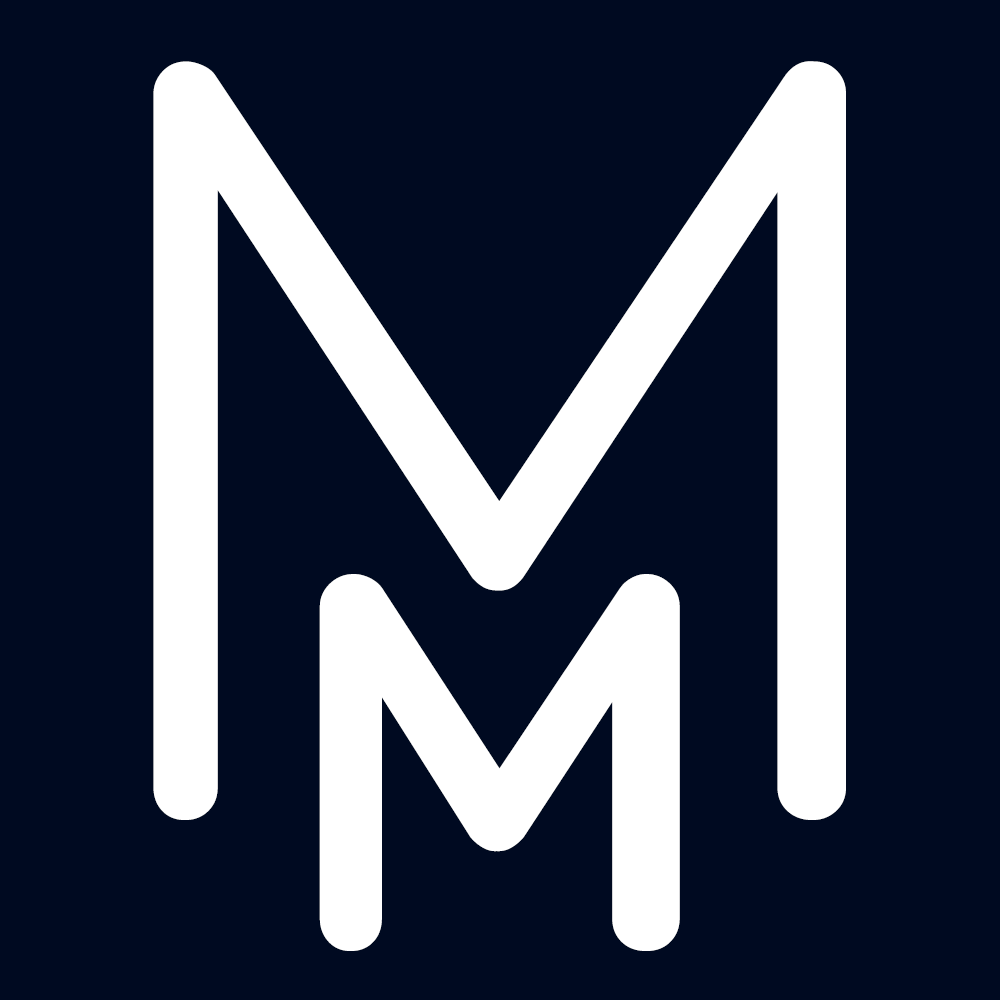
<style>
.page{position:relative;width:1000px;height:1000px;background:#000a21}
.page>*{position:absolute;margin:0}
.t1{font:1083.3px "Quicksand-Regular";letter-spacing:0.04em;color:#ffffff}
.t2{font:537.5px "Quicksand-Bold";letter-spacing:0.04em;color:#ffffff}
</style>
<div class="page">
<p class="t1" style="left:153px;top:61px;width:693px;height:759px">M</p>
<p class="t2" style="left:319px;top:574px;width:361px;height:377px">M</p>
</div>
